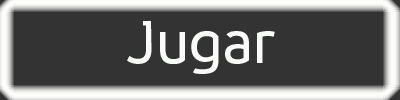
<style>
.page{position:relative;width:400px;height:100px;background:#333333}
.page>*{position:absolute;margin:0}
.t1{font:60px "Earthbound";color:#f9fbf8}
</style>
<div class="page">
<p class="t1" style="left:127px;top:21px;width:148px;height:53px">Jugar</p>
</div>
